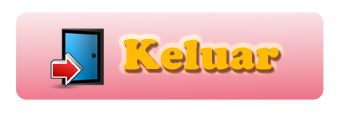
<style>
.page{position:relative;width:340px;height:113px;background:#ffffff}
.page>*{position:absolute;margin:0}
.t1{font:44.3px "CooperBlack";color:#ffbb00}
</style>
<div class="page">
<p class="t1" style="left:123px;top:39px;width:156px;height:31px">Keluar</p>
</div>
